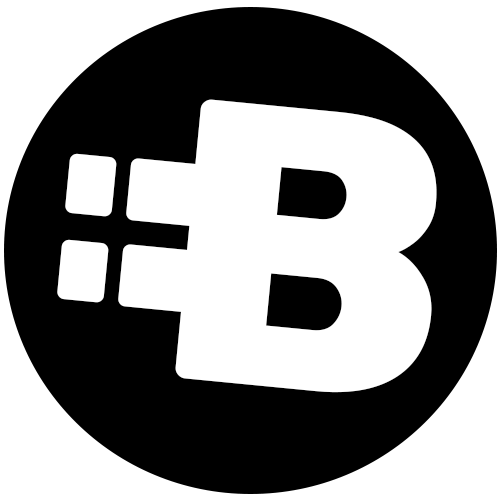
<style>
.page{position:relative;width:500px;height:500px;background:#ffffff}
.page>*{position:absolute;margin:0}
.t1{font:400px "Rubik-ExtraBold";color:#ffffff}
.t2{font:266.7px "Rubik-Black";color:#ffffff}
</style>
<div class="page">
<p class="t1" style="left:175px;top:99px;width:262px;height:294px;rotate:6deg">B</p>
<p class="t2" style="left:57px;top:153px;width:212px;height:166px;rotate:-84deg">ii</p>
</div>
